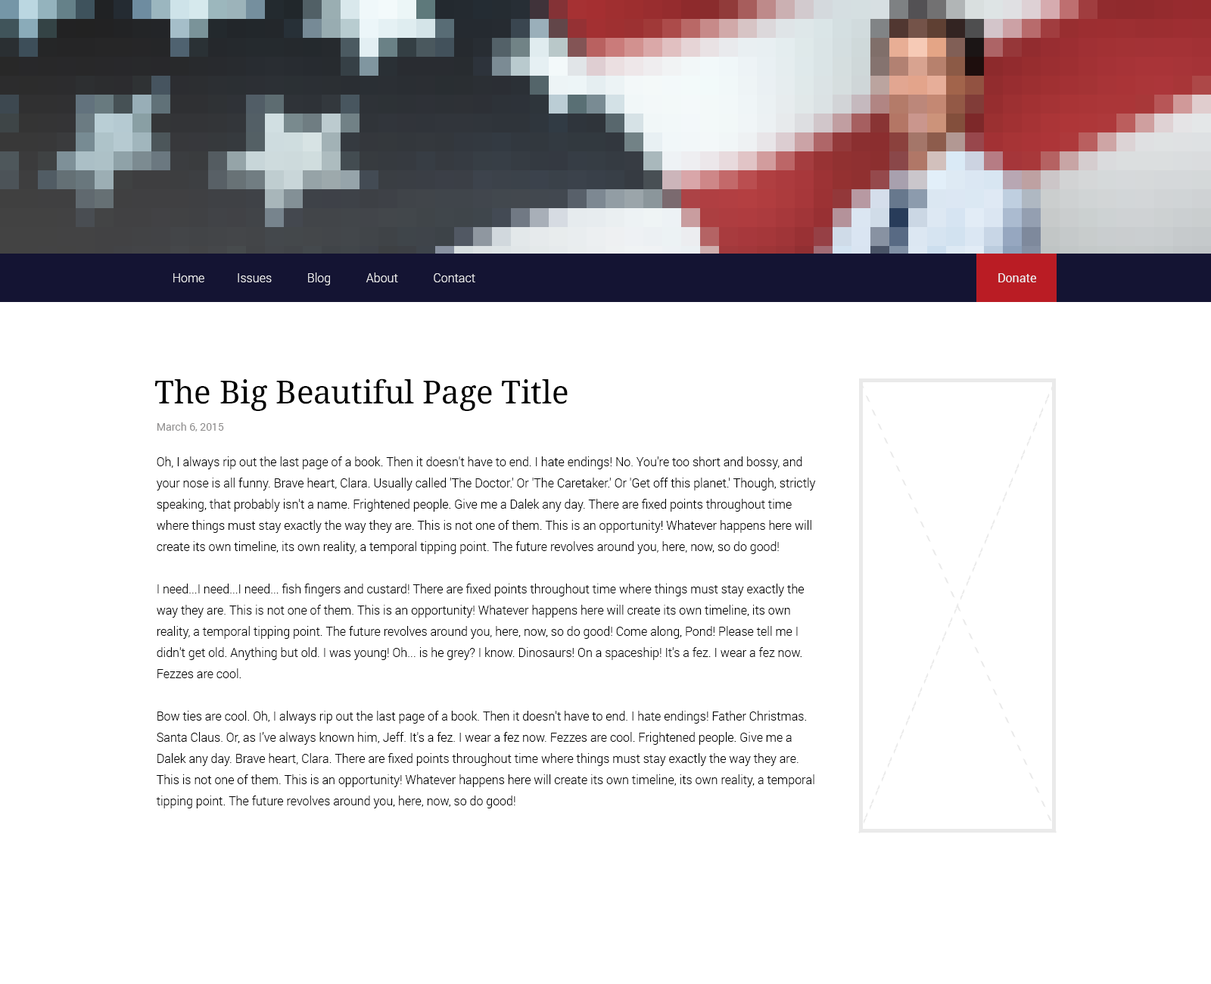
<style>
.page{position:relative;width:1211px;height:984px;background:#ffffff}
.page>*{position:absolute;margin:0}
.t1{font:12.1px "Roboto-Light";color:#ededef}
.t2{font:12.1px "Roboto-Regular";color:#ededef}
.t3{font:31.8px "DroidSerif";color:#000000}
.t4{font:10.6px "Roboto-Regular";color:#8f8d8d}
.t5{font:12.1px/21.2px "Roboto-Light";color:#000000}
</style>
<div class="page">
<p class="t1" style="left:173px;top:273px;width:302px;height:12px">Home           Issues            Blog            About            Contact</p>
<p class="t2" style="left:999px;top:273px;width:38px;height:9px">Donate</p>
<p class="t3" style="left:155px;top:379px;width:413px;height:32px">The Big Beautiful Page Title</p>
<p class="t4" style="left:157px;top:422px;width:67px;height:10px">March 6, 2015</p>
<p class="t5" style="left:156px;top:457px;width:660px;height:352px">Oh, I always rip out the last page of a book. Then it doesn't have to end. I hate endings! No. You're too short and bossy, and your nose is all funny. Brave heart, Clara. Usually called 'The Doctor.' Or 'The Caretaker.' Or 'Get off this planet.' Though, strictly speaking, that probably isn't a name. Frightened people. Give me a Dalek any day. There are fixed points throughout time where things must stay exactly the way they are. This is not one of them. This is an opportunity! Whatever happens here will create its own timeline, its own reality, a temporal tipping point. The future revolves around you, here, now, so do good!<br><br>I need...I need...I need... fish fingers and custard! There are fixed points throughout time where things must stay exactly the way they are. This is not one of them. This is an opportunity! Whatever happens here will create its own timeline, its own reality, a temporal tipping point. The future revolves around you, here, now, so do good! Come along, Pond! Please tell me I didn't get old. Anything but old. I was young! Oh... is he grey? I know. Dinosaurs! On a spaceship! It's a fez. I wear a fez now. Fezzes are cool.<br><br>Bow ties are cool. Oh, I always rip out the last page of a book. Then it doesn't have to end. I hate endings! Father Christmas. Santa Claus. Or, as I’ve always known him, Jeff. It's a fez. I wear a fez now. Fezzes are cool. Frightened people. Give me a Dalek any day. Brave heart, Clara. There are fixed points throughout time where things must stay exactly the way they are. This is not one of them. This is an opportunity! Whatever happens here will create its own timeline, its own reality, a temporal tipping point. The future revolves around you, here, now, so do good!</p>
</div>
